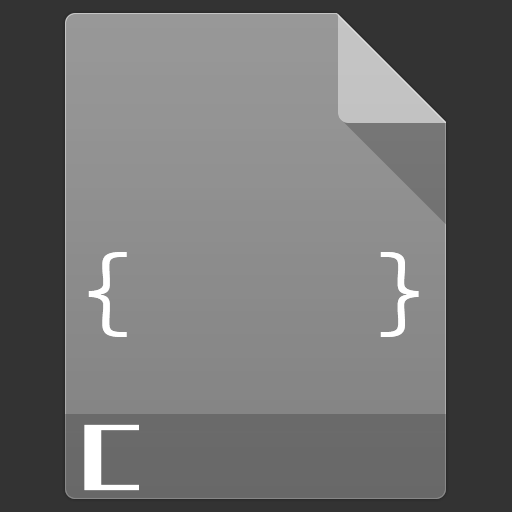
<style>
.page{position:relative;width:512px;height:512px;background:#333333}
.page>*{position:absolute;margin:0}
.t1{font:99px "SourceCodeProYaHeiHybrid";letter-spacing:0.07em;color:#ffffff}
.t2{font:72px "MFLiHei_Noncommercial-Regular";letter-spacing:0.07em;color:#ffffff}
</style>
<div class="page">
<p class="t1" style="left:88px;top:252px;width:331px;height:85px">{    }</p>
<p class="t2" style="left:84px;top:424px;width:55px;height:67px">C</p>
</div>
